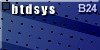
<style>
.page{position:relative;width:100px;height:50px}
.page>*{position:absolute;margin:0}
.t1{font:12.3px "Impact";letter-spacing:0.1em;color:#ffffff;scale:1.09 1}
.t2{font:11px "Arial-BoldMT";letter-spacing:-0.05em;color:#d0d7ff}
</style>
<div class="page">
<p class="t1" style="left:12px;top:4px;width:43px;height:12px">btdsys</p>
<p class="t2" style="left:78px;top:4px;width:19px;height:8px">B24</p>
</div>
